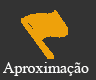
<style>
.page{position:relative;width:96px;height:80px;background:#333333}
.page>*{position:absolute;margin:0}
.t1{font:24px "AngsanaUPC";color:#fcfcfb}
</style>
<div class="page">
<p class="t1" style="left:3px;top:62px;width:86px;height:14px">Aproximação</p>
</div>
